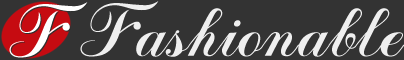
<style>
.page{position:relative;width:404px;height:60px;background:#333333}
.page>*{position:absolute;margin:0}
.t1{font:60px "ScrCyr-Bold";letter-spacing:-0.2em;color:#ffffff}
.t2{font:60px "ScrCyr-Bold";color:#efefef}
.t3{font:60px "ScrCyr-Bold";letter-spacing:-0.2em;color:#efefef}
</style>
<div class="page">
<p class="t1" style="left:9px;top:2px;width:79px;height:56px">F</p>
<p class="t2" style="left:80px;top:1px;width:324px;height:56px"><span class="t3">F</span>ashionable</p>
</div>
